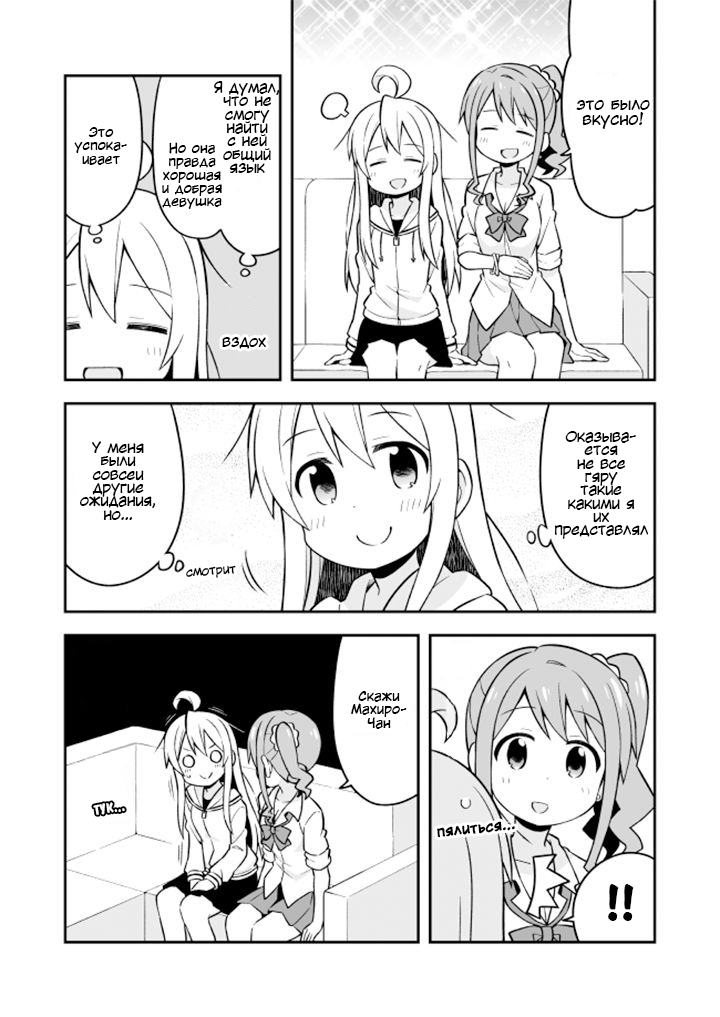
<style>
.page{position:relative;width:720px;height:1017px;background:#ffffff}
.page>*{position:absolute;margin:0}
.t1{font:14.7px/13.3px "KuraiVoice2";color:#000000}
.t2{font:16px/14.7px "KuraiVoice2";color:#000000}
.t3{font:13.3px/13.3px "KuraiVoice2";color:#000000}
.t4{font:14.7px "KuraiVoice2";color:#000000}
.t5{font:12px "KuraiVoice2";color:#000000}
.t6{font:13.3px "ADomInoBold";color:#ffffff;scale:1.03 1}
.t7{font:13.3px "KuraiVoice2-Bold";color:#000000}
.t8{font:48px "ADomInoBold";color:#000000}
</style>
<div class="page">
<p class="t1" style="left:214px;top:81px;width:66px;height:92px;text-align:center">Я думал,<br>что не<br>смогу<br>найти<br>с ней<br>общий<br>язык</p>
<p class="t2" style="left:576px;top:99px;width:74px;height:30px;text-align:center">это было<br>вкусно!</p>
<p class="t3" style="left:74px;top:127px;width:53px;height:38px;text-align:center">Это<br>успока-<br>ивает</p>
<p class="t3" style="left:162px;top:142px;width:60px;height:67px;text-align:center">Но она<br>правда<br>хорошая<br>и добрая<br>девушка</p>
<p class="t4" style="left:222px;top:337px;width:44px;height:12px">вздох</p>
<p class="t1" style="left:554px;top:431px;width:95px;height:108px;text-align:center">Оказыва-<br>ется<br>не все<br>гяру<br>такие<br>какими я<br>их<br>представлял</p>
<p class="t1" style="left:79px;top:441px;width:77px;height:79px;text-align:center">У меня<br>были<br>совсеи<br>другие<br>ожидания,<br>но…</p>
<p class="t5" style="left:186px;top:565px;width:50px;height:13px;rotate:-4deg">смотрит</p>
<p class="t3" style="left:351px;top:691px;width:56px;height:38px;text-align:center">Скажи<br>Махиро-<br>Чан</p>
<p class="t6" style="left:93px;top:802px;width:32px;height:13px;rotate:-9deg">ТУК...</p>
<p class="t7" style="left:437px;top:821px;width:78px;height:17px;rotate:-6deg">пялиться...</p>
<p class="t8" style="left:608px;top:884px;width:11px;height:37px">!</p>
<p class="t8" style="left:623px;top:884px;width:11px;height:37px">!</p>
</div>
